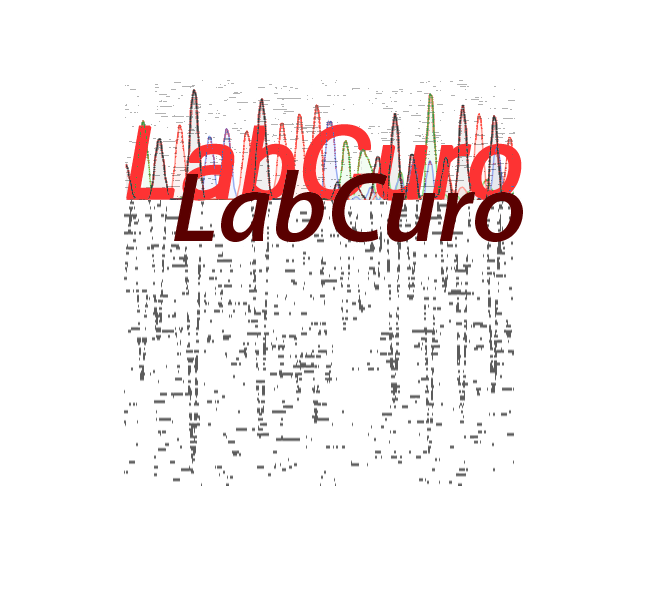
<style>
.page{position:relative;width:662px;height:597px;background:#ffffff}
.page>*{position:absolute;margin:0}
.t1{font:110px "Vrinda";color:#fd3333;font-weight:bold;font-style:italic}
</style>
<div class="page">
<p class="t1" style="left:126px;top:124px;width:396px;height:77px">LabCuro</p>
</div>
